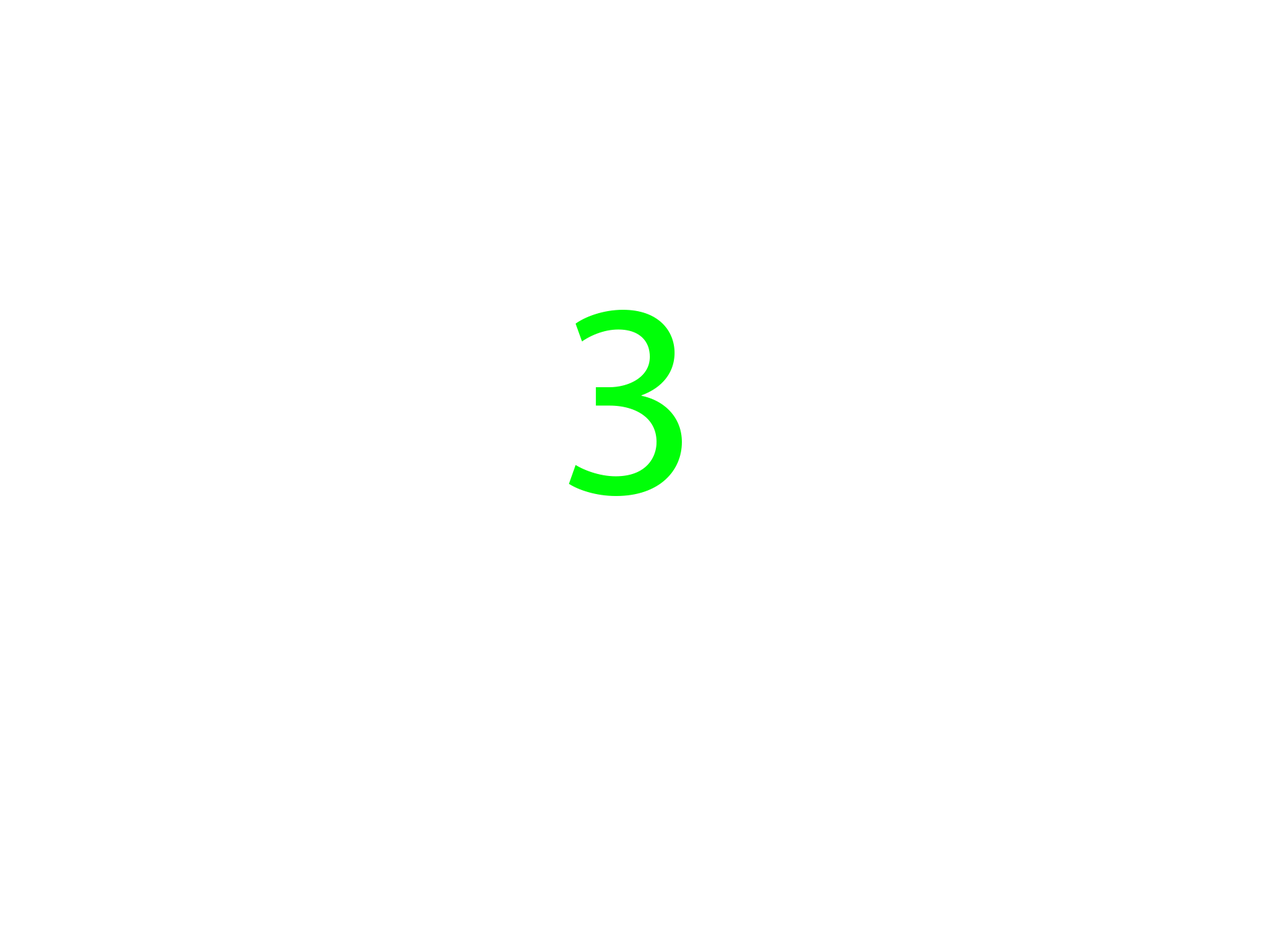
<style>
.page{position:relative;width:1261px;height:946px;background:#ffffff}
.page>*{position:absolute;margin:0}
.t1{font:278px "MyriadPro-Regular";color:#00ff08}
</style>
<div class="page">
<p class="t1" style="left:569px;top:310px;width:113px;height:186px">3</p>
</div>
